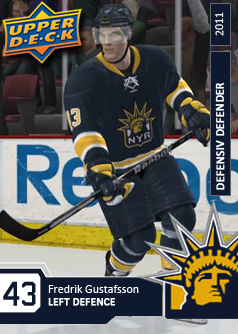
<style>
.page{position:relative;width:238px;height:334px}
.page>*{position:absolute;margin:0}
.t1{font:12px "Calibri";color:#ffffff;font-weight:bold}
.t2{font:12px "Calibri";color:#ffffff}
.t3{font:24px "NHL_Edge_Tampa_Bay";color:#0e192f}
.t4{font:11px "Calibri";color:#ffffff;font-weight:bold}
</style>
<div class="page">
<p class="t1" style="left:215px;top:12px;width:10px;height:178px;rotate:-90deg">DEFENSIV DEFENDER               <span class="t2">2011</span></p>
<p class="t3" style="left:3px;top:281px;width:33px;height:25px">43</p>
<p class="t2" style="left:48px;top:285px;width:91px;height:8px">Fredrik Gustafsson</p>
<p class="t4" style="left:48px;top:298px;width:67px;height:8px">LEFT DEFENCE</p>
</div>
